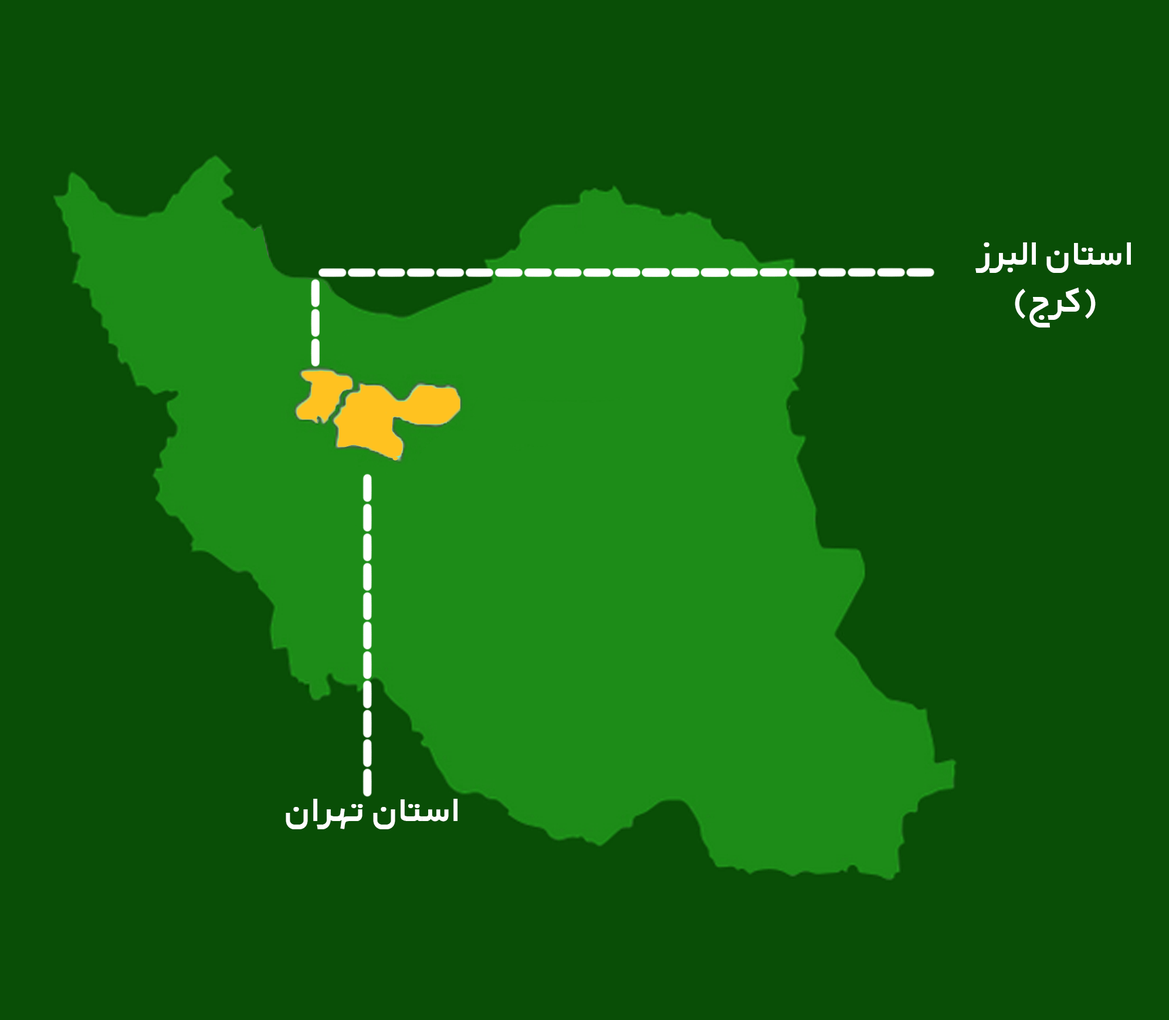
<style>
.page{position:relative;width:1169px;height:1020px;background:#094e06}
.page>*{position:absolute;margin:0}
.t1{font:39.1px "BYekan+-Bold";color:#ffffff}
</style>
<div class="page">
<p class="t1" style="left:976px;top:242px;width:155px;height:85px;text-align:center">استان البرز<br>(کرج)</p>
<p class="t1" style="left:286px;top:799px;width:172px;height:30px">استان تهران</p>
</div>
